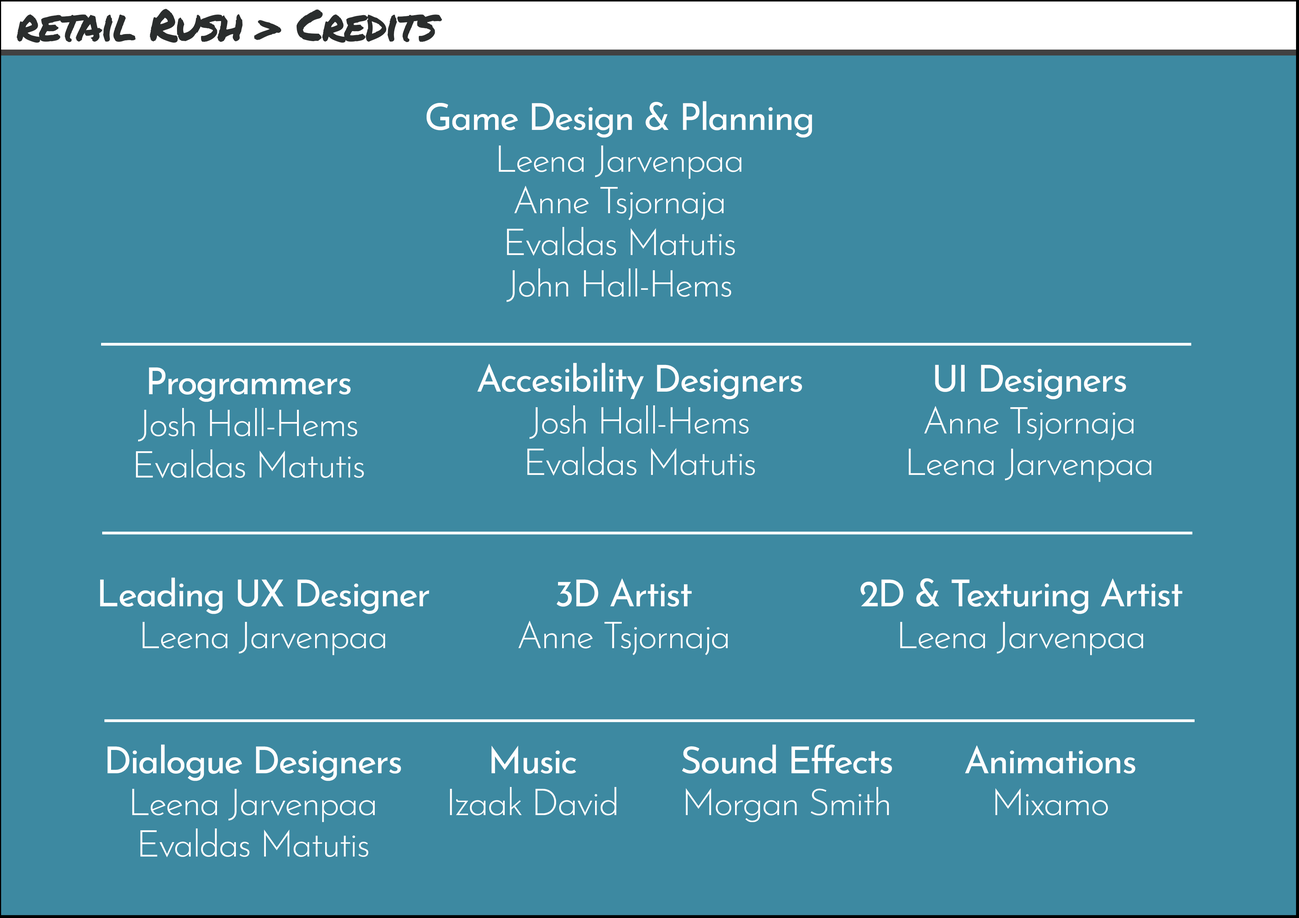
<style>
.page{position:relative;width:1299px;height:918px;background:#3d89a1}
.page>*{position:absolute;margin:0}
.t1{font:44px "PermanentMarker-Regular";letter-spacing:-0.04em;color:#2a2d2d}
.t2{font:37px/41.6px "JosefinSans-Light";letter-spacing:-0.04em;color:#ffffff}
.t3{font:37px/41.6px "JosefinSans-Regular";letter-spacing:-0.04em;color:#ffffff}
</style>
<div class="page">
<p class="t1" style="left:17px;top:9px;width:425px;height:34px">retail Rush &gt; Credits</p>
<p class="t2" style="left:426px;top:101px;width:386px;height:201px;text-align:center"><span class="t3">Game Design &amp; Planning<br></span>Leena Jarvenpaa<br>Anne Tsjornaja<br>Evaldas Matutis<br>John Hall-Hems</p>
<p class="t2" style="left:477px;top:363px;width:325px;height:113px;text-align:center"><span class="t3">Accesibility Designers<br></span>Josh Hall-Hems<br>Evaldas Matutis</p>
<p class="t2" style="left:909px;top:365px;width:242px;height:117px;text-align:center"><span class="t3">UI Designers<br></span>Anne Tsjornaja<br>Leena Jarvenpaa</p>
<p class="t2" style="left:136px;top:367px;width:228px;height:111px;text-align:center"><span class="t3">Programmers<br></span>Josh Hall-Hems<br>Evaldas Matutis</p>
<p class="t3" style="left:100px;top:578px;width:329px;height:77px;text-align:center">Leading UX Designer<br><span class="t2">Leena Jarvenpaa</span></p>
<p class="t2" style="left:518px;top:578px;width:209px;height:77px;text-align:center"><span class="t3">3D Artist<br></span>Anne Tsjornaja</p>
<p class="t3" style="left:860px;top:578px;width:322px;height:77px;text-align:center">2D &amp; Texturing Artist<br><span class="t2">Leena Jarvenpaa</span></p>
<p class="t2" style="left:107px;top:745px;width:294px;height:112px;text-align:center"><span class="t3">Dialogue Designers<br></span>Leena Jarvenpaa<br>Evaldas Matutis</p>
<p class="t2" style="left:450px;top:746px;width:166px;height:70px;text-align:center"><span class="t3">Music<br></span>Izaak David</p>
<p class="t3" style="left:682px;top:745px;width:210px;height:77px;text-align:center">Sound Effects<br><span class="t2">Morgan Smith</span></p>
<p class="t3" style="left:965px;top:745px;width:170px;height:71px;text-align:center">Animations<br><span class="t2">Mixamo</span></p>
</div>
